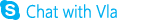
<style>
.page{position:relative;width:150px;height:24px;background:#ffffff}
.page>*{position:absolute;margin:0}
.t1{font:18px "SegoeUI-Semilight";color:#00aff0;scale:0.9 1}
</style>
<div class="page">
<p class="t1" style="left:26px;top:4px;width:91px;height:14px">Chat with Vla</p>
</div>
